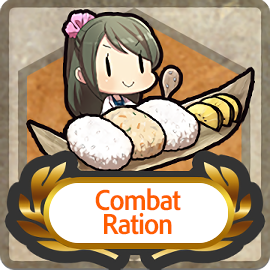
<style>
.page{position:relative;width:270px;height:270px}
.page>*{position:absolute;margin:0}
.t1{font:30px/24px "AdobeClean-Bold";letter-spacing:-0.04em;color:#ff5d00;scale:0.9 1}
</style>
<div class="page">
<p class="t1" style="left:95px;top:188px;width:86px;height:47px;text-align:center">Combat<br>Ration</p>
</div>
